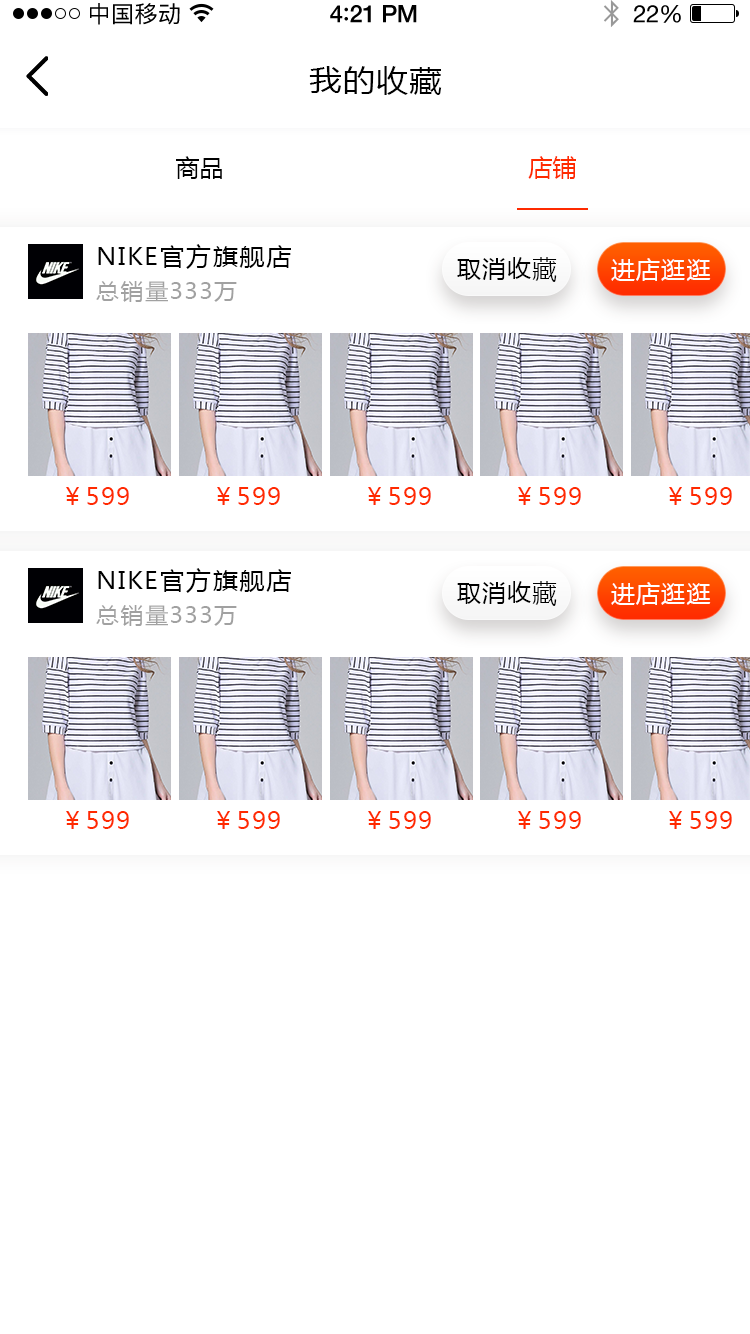
<style>
.page{position:relative;width:750px;height:1334px;background:#ffffff}
.page>*{position:absolute;margin:0}
.t1{font:23px "PingFangSC-Regular";letter-spacing:0.02em;color:#000000}
.t2{font:24px "HelveticaNeue-Medium";letter-spacing:-0.02em;color:#000000}
.t3{font:26px "Avenir-Medium";letter-spacing:-0.02em;color:#000000}
.t4{font:24px "HelveticaNeue";letter-spacing:-0.02em;color:#000000}
.t5{font:30px "MicrosoftYaHei";letter-spacing:0.05em;color:#000000;scale:1.06 1}
.t6{font:24px "MicrosoftYaHei";color:#000000;text-transform:uppercase}
.t7{font:24px "MicrosoftYaHei";color:#ff2a00;text-transform:uppercase}
.t8{font:24px "MicrosoftYaHei";letter-spacing:0.05em;color:#000000;scale:1.06 1}
.t9{font:24px "MicrosoftYaHei";letter-spacing:0.05em;color:#000000;text-transform:uppercase}
.t10{font:24px "MicrosoftYaHei";letter-spacing:0.05em;color:#ffffff;text-transform:uppercase}
.t11{font:22px "MicrosoftYaHei";letter-spacing:0.05em;color:#a2a2a2;scale:1.06 1}
.t12{font:24px "MicrosoftYaHei";letter-spacing:0.05em;color:#ff2a00;text-transform:uppercase}
</style>
<div class="page">
<p class="t1" style="left:90px;top:3px;width:90px;height:22px">中国移动</p>
<p class="t2" style="left:330px;top:5px;width:87px;height:18px">4<span class="t3">:</span>21 PM</p>
<p class="t4" style="left:633px;top:5px;width:48px;height:18px">22%</p>
<p class="t5" style="left:309px;top:66px;width:133px;height:29px">我的收藏</p>
<p class="t6" style="left:176px;top:156px;width:46px;height:23px">商品</p>
<p class="t7" style="left:528px;top:156px;width:48px;height:23px">店铺</p>
<p class="t8" style="left:98px;top:244px;width:193px;height:25px">NIKE官方旗舰店</p>
<p class="t9" style="left:457px;top:257px;width:100px;height:25px">取消收藏</p>
<p class="t10" style="left:611px;top:258px;width:100px;height:23px">进店逛逛</p>
<p class="t11" style="left:96px;top:281px;width:141px;height:21px">总销量333万</p>
<p class="t12" style="left:66px;top:487px;width:63px;height:18px">￥599</p>
<p class="t12" style="left:217px;top:487px;width:63px;height:18px">￥599</p>
<p class="t12" style="left:368px;top:487px;width:63px;height:18px">￥599</p>
<p class="t12" style="left:518px;top:487px;width:63px;height:18px">￥599</p>
<p class="t12" style="left:669px;top:487px;width:63px;height:18px">￥599</p>
<p class="t8" style="left:98px;top:568px;width:193px;height:25px">NIKE官方旗舰店</p>
<p class="t9" style="left:457px;top:581px;width:100px;height:25px">取消收藏</p>
<p class="t10" style="left:611px;top:582px;width:100px;height:23px">进店逛逛</p>
<p class="t11" style="left:96px;top:605px;width:141px;height:21px">总销量333万</p>
<p class="t12" style="left:66px;top:811px;width:63px;height:18px">￥599</p>
<p class="t12" style="left:217px;top:811px;width:63px;height:18px">￥599</p>
<p class="t12" style="left:368px;top:811px;width:63px;height:18px">￥599</p>
<p class="t12" style="left:518px;top:811px;width:63px;height:18px">￥599</p>
<p class="t12" style="left:669px;top:811px;width:63px;height:18px">￥599</p>
</div>
